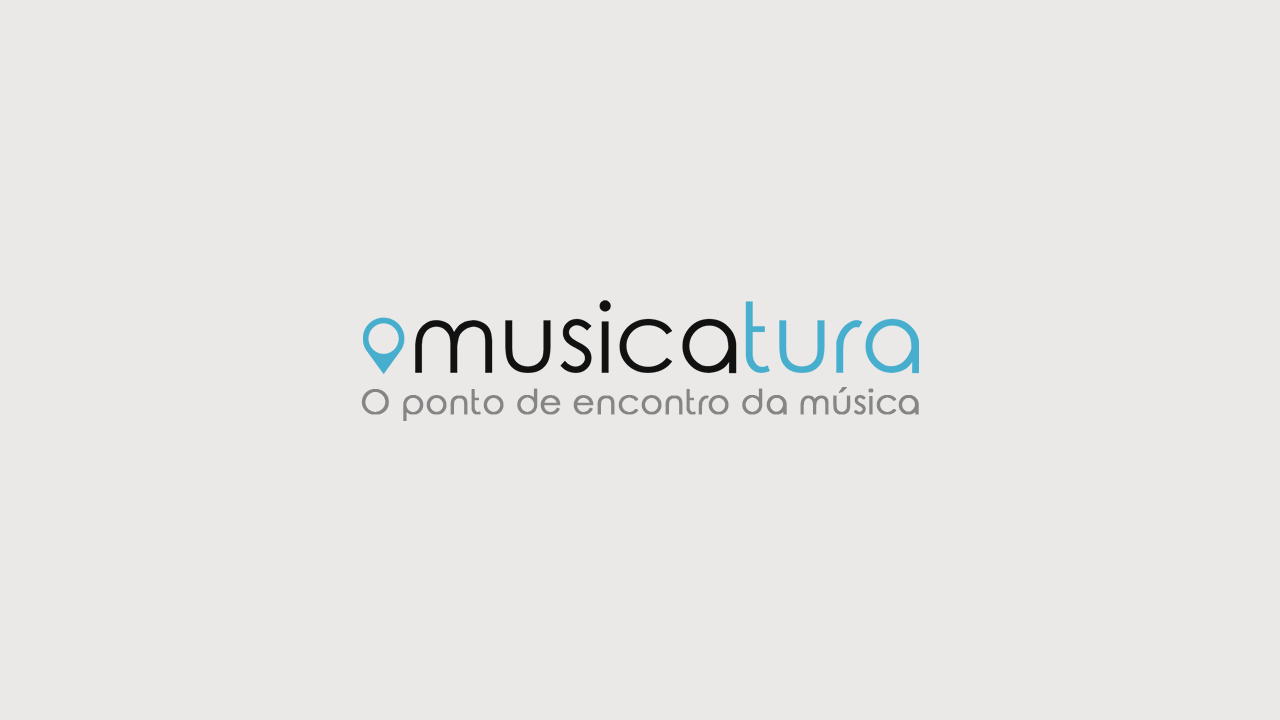
<style>
.page{position:relative;width:1280px;height:720px;background:#eae9e7}
.page>*{position:absolute;margin:0}
.t1{font:33.9px "RoundedElegance-Regular";color:#858585;font-weight:bold}
</style>
<div class="page">
<p class="t1" style="left:361px;top:387px;width:558px;height:34px">O ponto de encontro da música</p>
</div>
